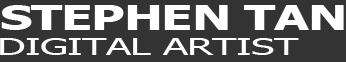
<style>
.page{position:relative;width:346px;height:62px;background:#333333}
.page>*{position:absolute;margin:0}
.t1{font:35.2px "Tahoma-Bold";letter-spacing:-0.02em;color:#ffffff;scale:1.45 1}
.t2{font:22.8px "Tahoma";letter-spacing:-0.02em;color:#ffffff;scale:1.85 1}
</style>
<div class="page">
<p class="t1" style="left:1px;top:5px;width:343px;height:25px">STEPHEN TAN</p>
<p class="t2" style="left:0px;top:38px;width:299px;height:17px">DIGITAL ARTIST</p>
</div>
